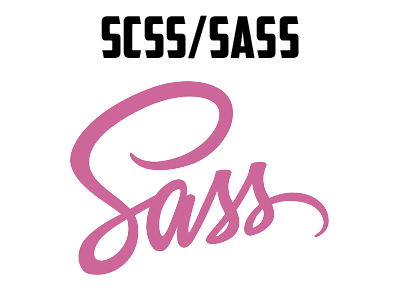
<style>
.page{position:relative;width:400px;height:300px;background:#ffffff}
.page>*{position:absolute;margin:0}
.t1{font:57.6px "AmericanCaptain";color:#000000}
</style>
<div class="page">
<p class="t1" style="left:101px;top:15px;width:198px;height:44px">SCSS/SASS</p>
</div>
